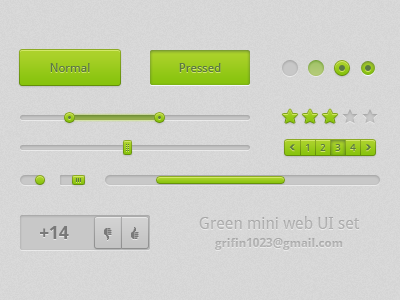
<style>
.page{position:relative;width:400px;height:300px}
.page>*{position:absolute;margin:0}
.t1{font:12px "DroidSans";color:#5c7944}
.t2{font:10px "DroidSans"}
.t3{font:10px "DroidSans";color:#5c7944}
.t4{font:16px/18px "DroidSans";color:#c8c8c8}
.t5{font:12px/18px "DroidSans-Bold";color:#c8c8c8}
.t6{font:18px "DroidSans-Bold";color:#797979}
</style>
<div class="page">
<p class="t1" style="left:50px;top:63px;width:40px;height:9px">Normal</p>
<p class="t1" style="left:179px;top:63px;width:42px;height:9px">Pressed</p>
<p class="t2" style="left:306px;top:144px;width:3px;height:7px">1</p>
<p class="t3" style="left:320px;top:144px;width:6px;height:7px">2</p>
<p class="t3" style="left:335px;top:144px;width:6px;height:7px">3</p>
<p class="t3" style="left:350px;top:144px;width:6px;height:7px">4</p>
<p class="t4" style="left:199px;top:216px;width:160px;height:34px;text-align:center">Green mini web UI set<br><span class="t5">grifin1023@gmail.com</span></p>
<p class="t6" style="left:40px;top:226px;width:29px;height:13px">+14</p>
</div>
